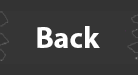
<style>
.page{position:relative;width:138px;height:75px;background:#353535}
.page>*{position:absolute;margin:0}
.t1{font:30px "MyriadPro-Bold";color:#ffffff}
</style>
<div class="page">
<p class="t1" style="left:37px;top:26px;width:63px;height:22px">Back</p>
</div>
